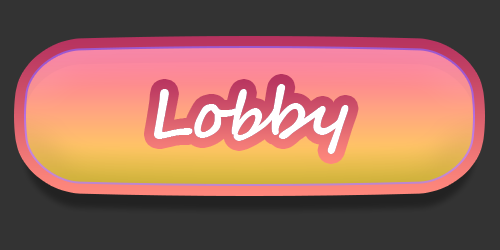
<style>
.page{position:relative;width:500px;height:250px;background:#333333}
.page>*{position:absolute;margin:0}
.t1{font:66.7px "SegoeScript-Bold";color:#ffffff}
</style>
<div class="page">
<p class="t1" style="left:154px;top:84px;width:195px;height:70px">Lobby</p>
</div>
